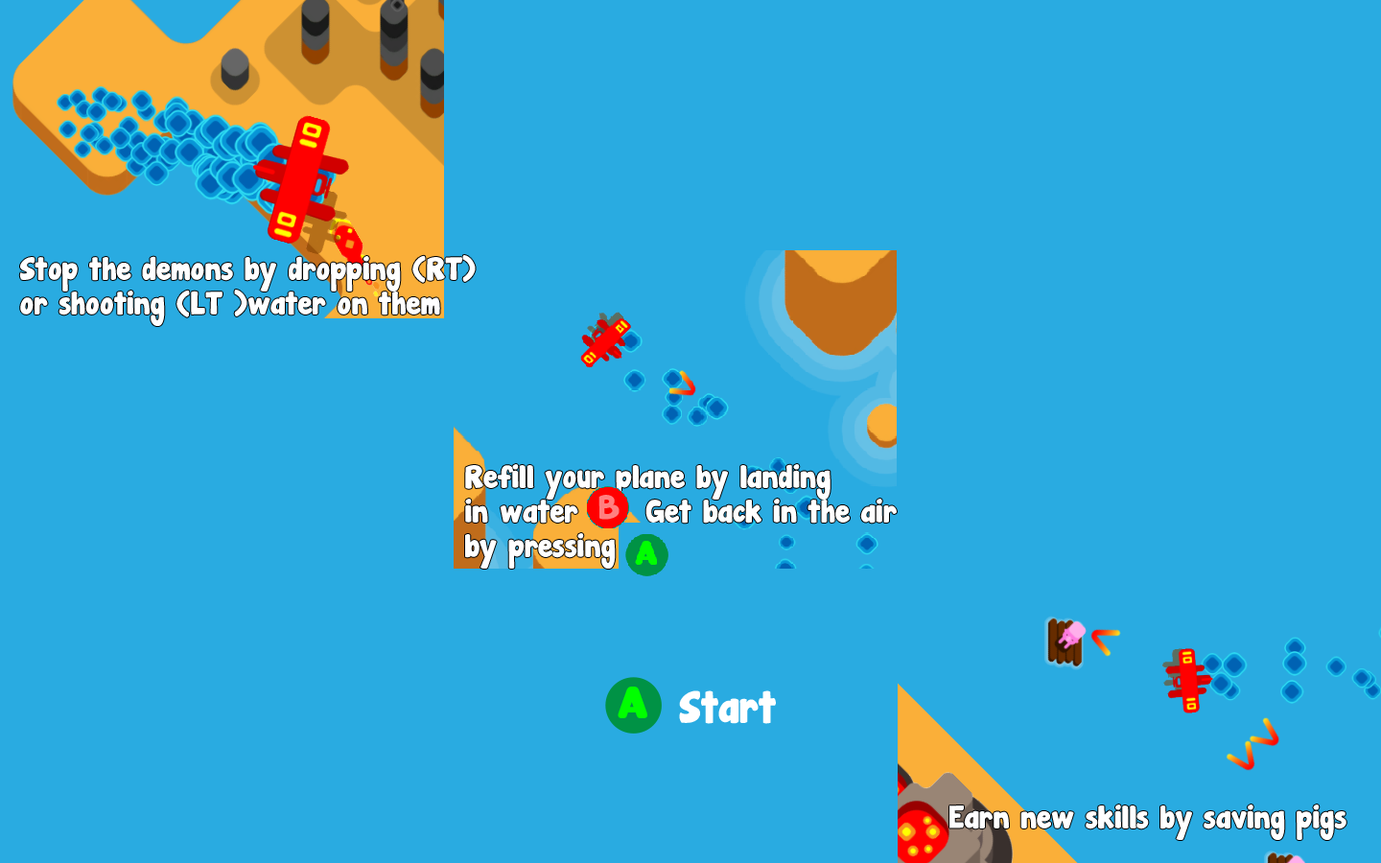
<style>
.page{position:relative;width:1381px;height:863px;background:#29abe1}
.page>*{position:absolute;margin:0}
.t1{font:28.8px "JandaManateeSolid";color:#ffffff}
.t2{font:30.2px "JandaManateeSolid";color:#ff8080}
.t3{font:40.3px "JandaManateeSolid";color:#ffffff}
</style>
<div class="page">
<p class="t1" style="left:19px;top:255px;width:457px;height:71px">Stop the demons by dropping (RT)<br>or shooting (LT )water on them</p>
<p class="t1" style="left:465px;top:464px;width:432px;height:105px">Refill your plane by landing<br>in water      Get back in the air<br>by pressing (A)</p>
<p class="t2" style="left:599px;top:495px;width:21px;height:25px">B</p>
<p class="t3" style="left:679px;top:691px;width:97px;height:33px">Start</p>
<p class="t1" style="left:950px;top:805px;width:397px;height:35px">Earn new skills by saving pigs</p>
</div>
